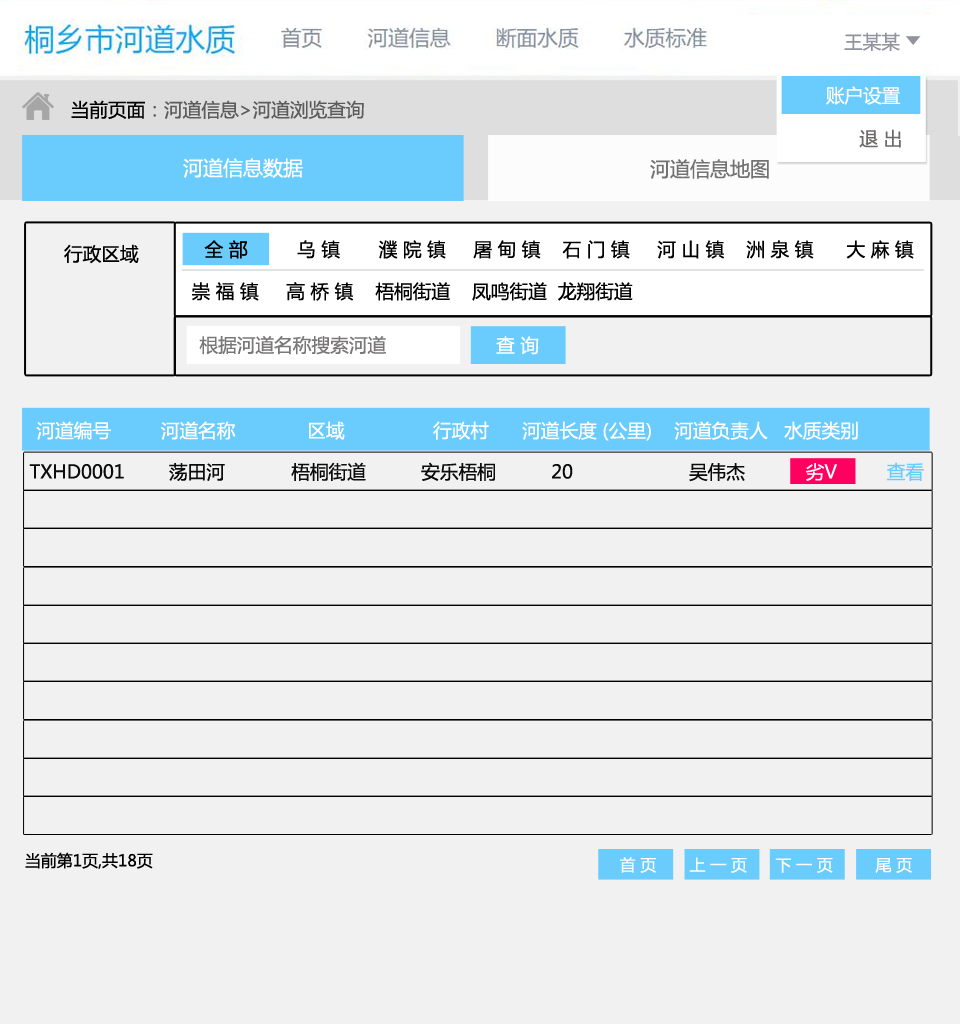
<style>
.page{position:relative;width:960px;height:1024px;background:#f1f1f1}
.page>*{position:absolute;margin:0}
.t1{font:18.7px "MicrosoftYaHei";color:#91949d}
.t2{font:18.7px "MicrosoftYaHei";color:#ffffff}
.t3{font:18.7px "MicrosoftYaHei";color:#5c5c5c}
.t4{font:18.7px "MicrosoftYaHei";color:#000000}
.t5{font:18.7px "MicrosoftYaHei";color:#6d6969}
.t6{font:20px "MicrosoftYaHei";color:#ffffff}
.t7{font:20px "MicrosoftYaHei";color:#737373}
.t8{font:18.7px "MicrosoftYaHei";color:#797777}
.t9{font:18.7px "MicrosoftYaHei";color:#0c0c0c}
.t10{font:18.7px "MicrosoftYaHei";color:#fefefe}
.t11{font:18.7px "MicrosoftYaHei";color:#6accfd}
.t12{font:16px "MicrosoftYaHei";color:#000000}
.t13{font:16px "MicrosoftYaHei";color:#ffffff}
</style>
<div class="page">
<p class="t1" style="left:844px;top:32px;width:56px;height:19px">王某某</p>
<p class="t2" style="left:826px;top:86px;width:75px;height:19px">账户设置</p>
<p class="t3" style="left:71px;top:100px;width:293px;height:19px"><span class="t4">当前页面</span>：河道信息&gt;河道浏览查询</p>
<p class="t5" style="left:859px;top:129px;width:42px;height:19px">退 出</p>
<p class="t6" style="left:183px;top:158px;width:120px;height:20px">河道信息数据</p>
<p class="t7" style="left:650px;top:159px;width:119px;height:20px">河道信息地图</p>
<p class="t4" style="left:64px;top:244px;width:75px;height:20px">行政区域</p>
<p class="t4" style="left:204px;top:240px;width:710px;height:19px">全 部         乌 镇       濮 院 镇     屠 甸 镇    石 门 镇     河 山 镇    洲 泉 镇      大 麻 镇</p>
<p class="t4" style="left:192px;top:282px;width:441px;height:19px">崇 福 镇     高 桥 镇    梧桐街道    凤鸣街道  龙翔街道</p>
<p class="t8" style="left:199px;top:335px;width:187px;height:20px">根据河道名称搜索河道</p>
<p class="t2" style="left:496px;top:336px;width:43px;height:19px">查 询</p>
<p class="t2" style="left:36px;top:421px;width:822px;height:20px">河道编号         河道名称             区域                行政村      河道长度 (公里)    河道负责人   水质类别</p>
<p class="t9" style="left:29px;top:462px;width:895px;height:20px">TXHD0001        荡田河            梧桐街道          安乐梧桐          20                     吴伟杰           <span class="t10">劣V         </span><span class="t11">查看</span></p>
<p class="t12" style="left:25px;top:852px;width:128px;height:17px">当前第1页,共18页</p>
<p class="t13" style="left:620px;top:857px;width:292px;height:16px">首 页       上 一 页      下 一 页         尾 页</p>
</div>
